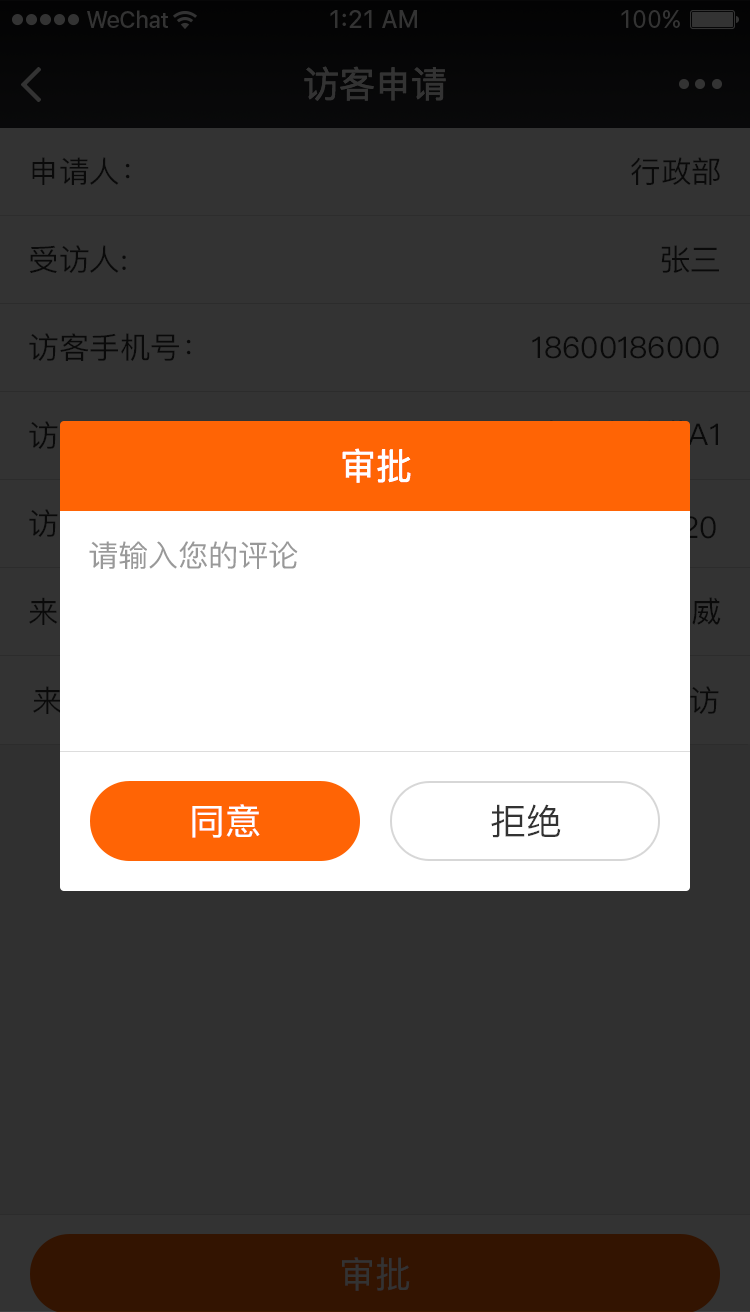
<style>
.page{position:relative;width:750px;height:1312px;background:#333333}
.page>*{position:absolute;margin:0}
.t1{font:36px "PingFangSC-Regular";color:#333333}
.t2{font:30px "PingFangSC-Regular";color:#0a0a0a}
.t3{font:36px "PingFangSC-Regular";color:#ffffff}
.t4{font:30px "PingFang-SC-Medium";color:#999999}
</style>
<div class="page">
<p class="t1" style="left:304px;top:66px;width:142px;height:35px">访客申请</p>
<p class="t2" style="left:32px;top:157px;width:98px;height:28px">申请人：</p>
<p class="t2" style="left:631px;top:157px;width:89px;height:28px">行政部</p>
<p class="t2" style="left:29px;top:245px;width:97px;height:28px">受访人:</p>
<p class="t2" style="left:661px;top:245px;width:58px;height:28px">张三</p>
<p class="t2" style="left:29px;top:333px;width:162px;height:28px">访客手机号：</p>
<p class="t2" style="left:532px;top:336px;width:187px;height:23px">18600186000</p>
<p class="t3" style="left:342px;top:448px;width:69px;height:35px">审批</p>
<p class="t4" style="left:89px;top:541px;width:209px;height:28px">请输入您的评论</p>
<p class="t3" style="left:192px;top:804px;width:68px;height:34px">同意</p>
<p class="t1" style="left:491px;top:804px;width:70px;height:34px">拒绝</p>
<p class="t1" style="left:342px;top:1257px;width:68px;height:34px">审批</p>
</div>
